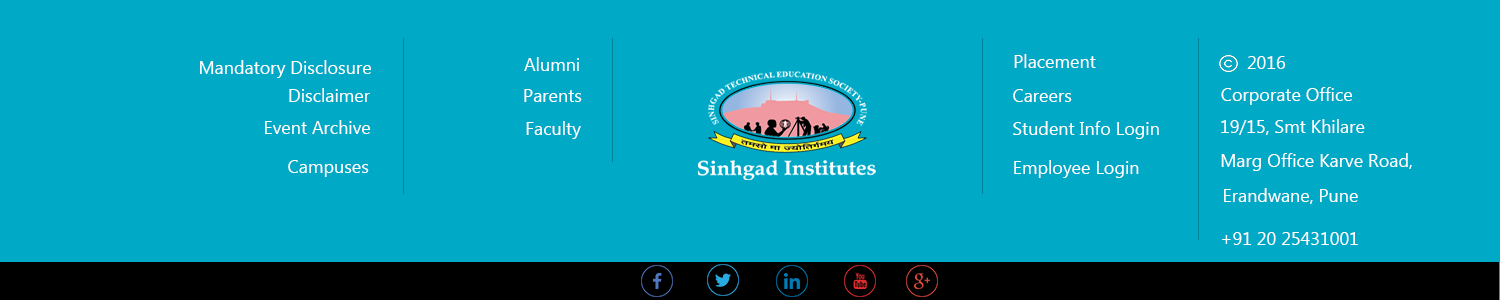
<style>
.page{position:relative;width:1500px;height:300px;background:#00aac7}
.page>*{position:absolute;margin:0}
.t1{font:18px "MicrosoftNewTaiLue";color:#ffffff}
</style>
<div class="page">
<p class="t1" style="left:1014px;top:54px;width:82px;height:14px">Placement</p>
<p class="t1" style="left:200px;top:60px;width:171px;height:18px">Mandatory Disclosure</p>
<p class="t1" style="left:524px;top:57px;width:55px;height:14px">Alumni</p>
<p class="t1" style="left:1247px;top:56px;width:39px;height:13px">2016</p>
<p class="t1" style="left:289px;top:88px;width:81px;height:14px">Disclaimer</p>
<p class="t1" style="left:524px;top:89px;width:58px;height:13px">Parents</p>
<p class="t1" style="left:1013px;top:89px;width:59px;height:13px">Careers</p>
<p class="t1" style="left:1221px;top:87px;width:131px;height:18px">Corporate Office</p>
<p class="t1" style="left:265px;top:120px;width:105px;height:14px">Event Archive</p>
<p class="t1" style="left:526px;top:121px;width:55px;height:18px">Faculty</p>
<p class="t1" style="left:1013px;top:121px;width:146px;height:18px">Student Info Login</p>
<p class="t1" style="left:1221px;top:119px;width:144px;height:16px">19/15, Smt Khilare</p>
<p class="t1" style="left:288px;top:160px;width:81px;height:17px">Campuses</p>
<p class="t1" style="left:1014px;top:160px;width:125px;height:18px">Employee Login</p>
<p class="t1" style="left:1221px;top:153px;width:191px;height:18px">Marg Office Karve Road,</p>
<p class="t1" style="left:1224px;top:188px;width:134px;height:16px">Erandwane, Pune</p>
<p class="t1" style="left:1222px;top:232px;width:136px;height:13px">+91 20 25431001</p>
</div>
